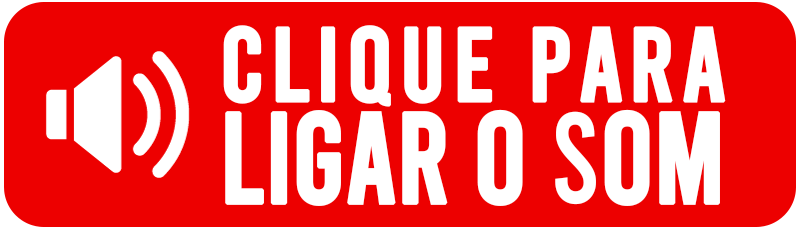
<style>
.page{position:relative;width:800px;height:230px;background:#ed0000}
.page>*{position:absolute;margin:0}
.t1{font:104px/90px "Bebas-Regular";letter-spacing:0.04em;color:#ffffff;font-weight:bold}
.t2{font:128.5px/90px "Bebas-Regular";letter-spacing:-0.02em;color:#ffffff;font-weight:bold;scale:0.93 1}
</style>
<div class="page">
<p class="t1" style="left:223px;top:25px;width:503px;height:181px;text-align:center">CLIQUE PARA<br><span class="t2">LIGAR O SOM</span></p>
</div>
